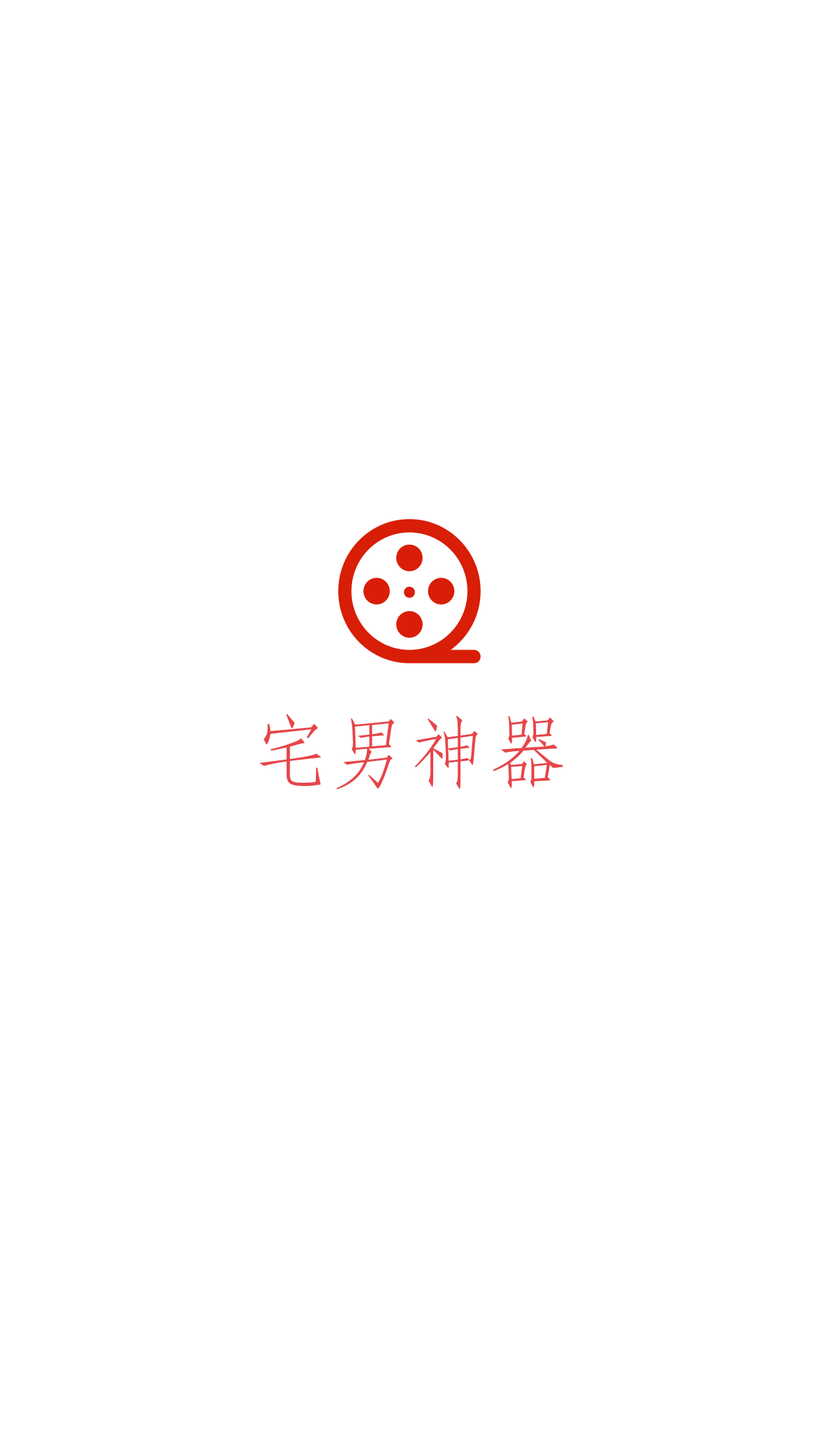
<style>
.page{position:relative;width:819px;height:1456px;background:#ffffff}
.page>*{position:absolute;margin:0}
.t1{font:79.1px "STFangsong";color:#e6454a}
</style>
<div class="page">
<p class="t1" style="left:259px;top:713px;width:304px;height:76px">宅男神器</p>
</div>
